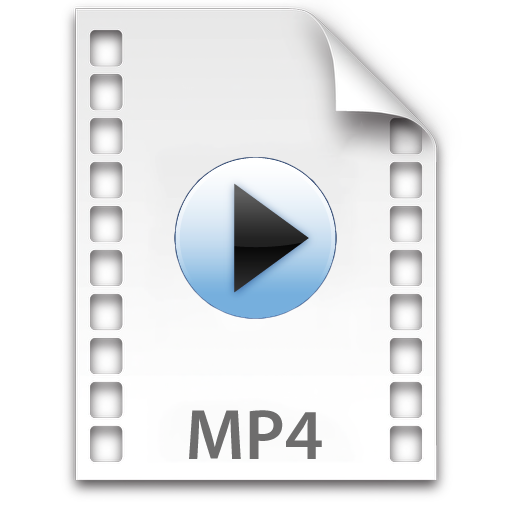
<style>
.page{position:relative;width:512px;height:512px;background:#ffffff}
.page>*{position:absolute;margin:0}
.t1{font:72px "MyriadPro-Semibold";color:#6e6d6d}
</style>
<div class="page">
<p class="t1" style="left:189px;top:410px;width:133px;height:49px">MP4</p>
</div>
